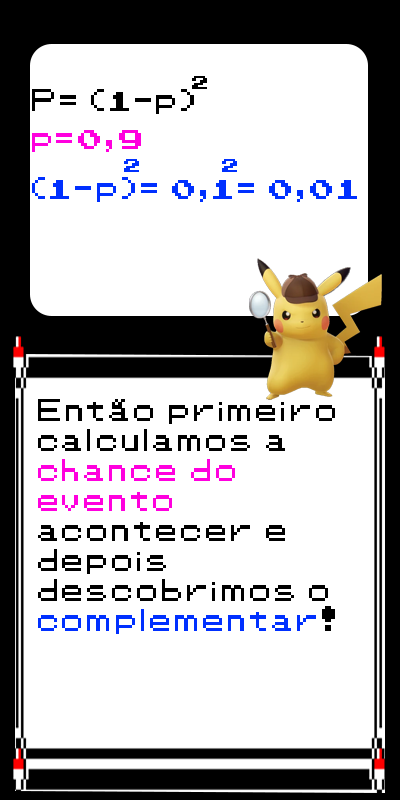
<style>
.page{position:relative;width:400px;height:800px;background:#ffffff}
.page>*{position:absolute;margin:0}
.t1{font:16.7px "Pokemon-Classic";color:#000000}
.t2{font:25px "Pokemon-Classic";color:#000000}
.t3{font:25px "Pokemon-Classic";color:#ff00de}
.t4{font:16.7px "Pokemon-Classic";color:#0030ff}
.t5{font:25px "Pokemon-Classic";color:#0030ff}
</style>
<div class="page">
<p class="t1" style="left:192px;top:76px;width:15px;height:13px">2</p>
<p class="t2" style="left:32px;top:89px;width:162px;height:25px">P= (1-p)</p>
<p class="t3" style="left:32px;top:130px;width:109px;height:22px">p=0,9</p>
<p class="t4" style="left:124px;top:159px;width:113px;height:13px">2           2</p>
<p class="t5" style="left:32px;top:177px;width:325px;height:25px">(1-p)= 0,1= 0,01</p>
<p class="t2" style="left:38px;top:399px;width:297px;height:235px">Então primeiro <br>calculamos a <br><span class="t3">chance do <br>evento</span> <br>acontecer e <br>depois <br>descobrimos o <br><span class="t5">complementar</span>!</p>
</div>
